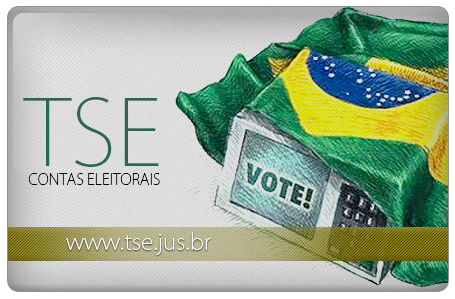
<style>
.page{position:relative;width:455px;height:299px}
.page>*{position:absolute;margin:0}
.t1{font:90.6px "KozGoPro-ExtraLight";color:#29674f}
.t2{font:15.5px "KozGoPro-ExtraLight";color:#000000;text-transform:uppercase;scale:0.96 1}
.t3{font:22.4px "KozGoPro-ExtraLight";color:#fefefe}
</style>
<div class="page">
<p class="t1" style="left:23px;top:97px;width:136px;height:70px">TSE</p>
<p class="t2" style="left:28px;top:173px;width:132px;height:12px">Contas Eleitorais</p>
<p class="t3" style="left:66px;top:232px;width:145px;height:23px">www.tse.jus.br</p>
</div>
